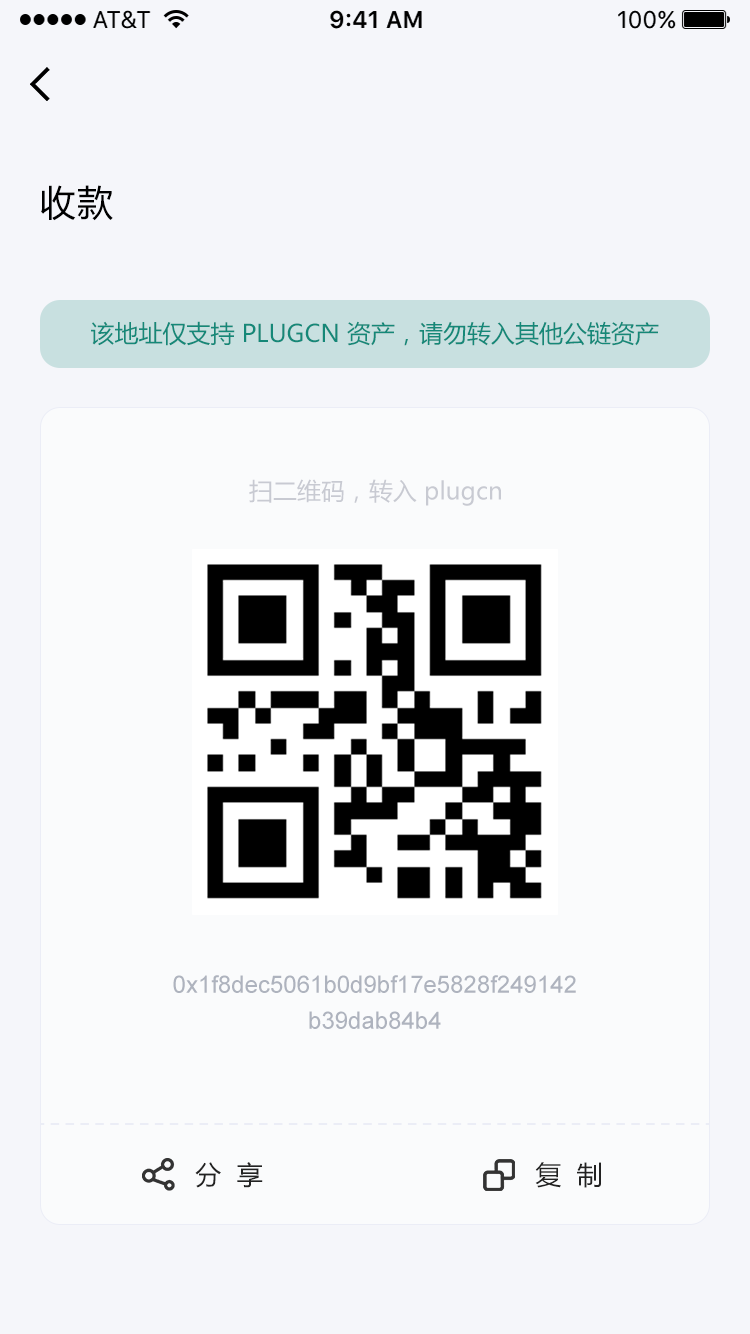
<style>
.page{position:relative;width:750px;height:1334px;background:#fafbfc}
.page>*{position:absolute;margin:0}
.t1{font:36px "MicrosoftYaHei";letter-spacing:0.05em;color:#000000}
.t2{font:24px "MicrosoftYaHei";color:#158878}
.t3{font:24px "MicrosoftYaHei";color:#c8cad2}
.t4{font:24px/36px "ArialMT";color:#aeb3be}
.t5{font:26px "MicrosoftYaHei";color:#222222}
</style>
<div class="page">
<p class="t1" style="left:41px;top:185px;width:72px;height:36px">收款</p>
<p class="t2" style="left:91px;top:321px;width:568px;height:25px">该地址仅支持 PLUGCN 资产，请勿转入其他公链资产</p>
<p class="t3" style="left:249px;top:479px;width:252px;height:27px">扫二维码，转入 plugcn</p>
<p class="t4" style="left:173px;top:975px;width:403px;height:54px;text-align:center">0x1f8dec5061b0d9bf17e5828f249142<br>b39dab84b4</p>
<p class="t5" style="left:195px;top:1162px;width:68px;height:26px">分  享</p>
<p class="t5" style="left:535px;top:1162px;width:66px;height:26px">复  制</p>
</div>
